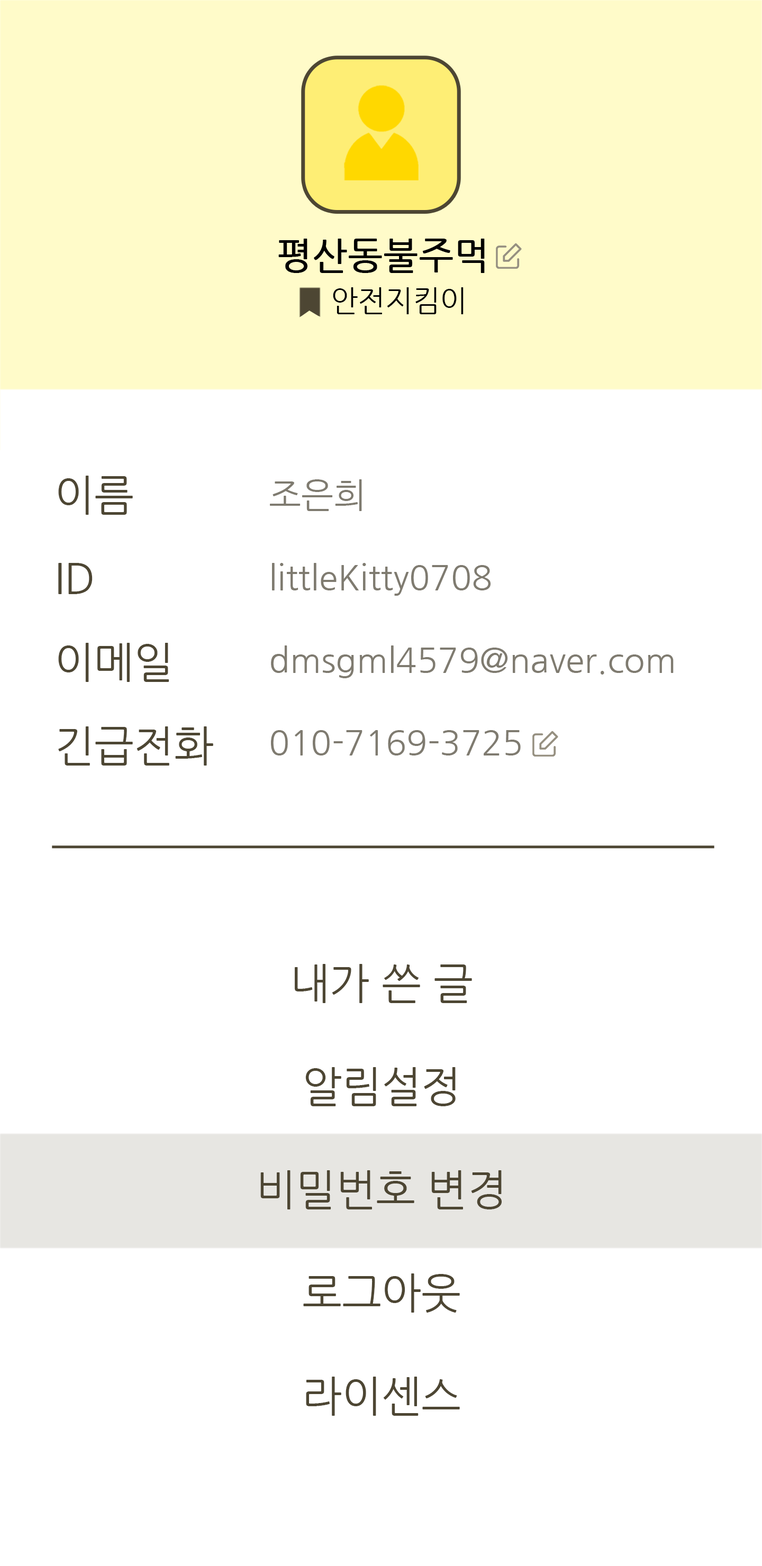
<style>
.page{position:relative;width:762px;height:1566px;background:#ffffff}
.page>*{position:absolute;margin:0}
.t1{font:36.7px "NanumGothic";color:#000000;font-weight:bold}
.t2{font:29.1px "NanumGothic";color:#000000}
.t3{font:42.3px/83.6px "NanumGothic";color:#4d4633}
.t4{font:34.4px/82.5px "NanumGothic";color:#7f7b70}
.t5{font:42.3px/103.1px "NanumGothic";color:#4d4633}
</style>
<div class="page">
<p class="t1" style="left:278px;top:239px;width:206px;height:34px">평산동불주먹</p>
<p class="t2" style="left:333px;top:287px;width:130px;height:27px">안전지킴이</p>
<p class="t3" style="left:58px;top:475px;width:155px;height:290px">이름<br>ID<br>이메일<br>긴급전화</p>
<p class="t4" style="left:270px;top:479px;width:403px;height:276px">조은희<br>littleKitty0708<br>dmsgml4579@naver.com<br>010-7169-3725</p>
<p class="t5" style="left:260px;top:964px;width:241px;height:451px;text-align:center">내가 쓴 글<br>알림설정<br>비밀번호 변경<br>로그아웃<br>라이센스</p>
</div>
